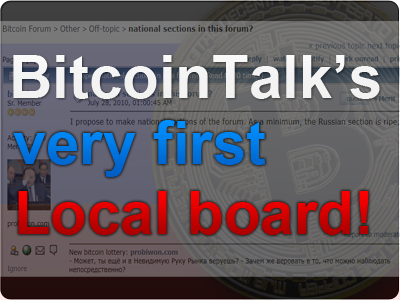
<style>
.page{position:relative;width:400px;height:300px}
.page>*{position:absolute;margin:0}
.t1{font:60px "Arial-BoldMT";color:#f3f3f3}
.t2{font:60px "Arial-BoldMT";color:#0079e5}
.t3{font:60px "Arial-BoldMT"}
</style>
<div class="page">
<p class="t1" style="left:13px;top:55px;width:367px;height:44px">BitcoinTalk’s</p>
<p class="t2" style="left:13px;top:120px;width:253px;height:57px">very first</p>
<p class="t3" style="left:18px;top:191px;width:351px;height:44px">Local board!</p>
</div>
